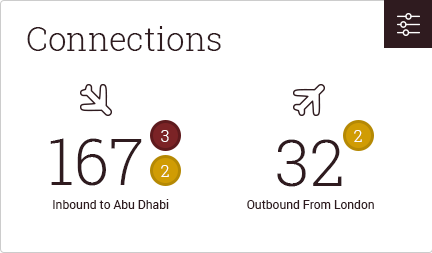
<style>
.page{position:relative;width:432px;height:253px;background:#ffffff}
.page>*{position:absolute;margin:0}
.t1{font:33px "RobotoSlab-Light";color:#2f1b1f}
.t2{font:16px "RobotoSlab-Light";color:#ffffff}
.t3{font:64px "RobotoSlab-Light";color:#2f1b1f}
.t4{font:12px "Roboto-Regular";color:#2f1b1f}
</style>
<div class="page">
<p class="t1" style="left:27px;top:26px;width:194px;height:25px">Connections</p>
<p class="t2" style="left:161px;top:130px;width:8px;height:12px">3</p>
<p class="t2" style="left:354px;top:130px;width:8px;height:12px">2</p>
<p class="t3" style="left:50px;top:138px;width:92px;height:48px">167</p>
<p class="t3" style="left:277px;top:139px;width:65px;height:48px">32</p>
<p class="t2" style="left:161px;top:165px;width:8px;height:12px">2</p>
<p class="t4" style="left:53px;top:199px;width:116px;height:10px">Inbound to Abu Dhabi</p>
<p class="t4" style="left:247px;top:200px;width:127px;height:9px">Outbound From London</p>
</div>
